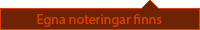
<style>
.page{position:relative;width:200px;height:30px;background:#702204}
.page>*{position:absolute;margin:0}
.t1{font:14px "MyriadPro-Regular";color:#de3f01}
</style>
<div class="page">
<p class="t1" style="left:37px;top:14px;width:125px;height:13px">Egna noteringar finns</p>
</div>
